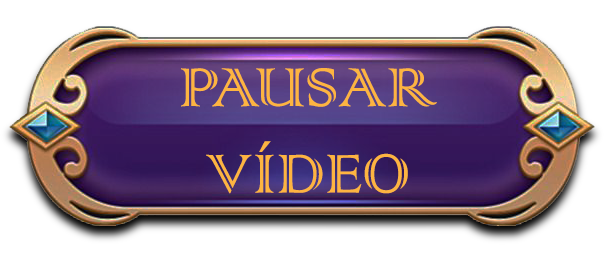
<style>
.page{position:relative;width:614px;height:264px;background:#ffffff}
.page>*{position:absolute;margin:0}
.t1{font:72px "ColonnaMT";color:#fdb441}
</style>
<div class="page">
<p class="t1" style="left:181px;top:68px;width:256px;height:126px;text-align:center">PAUSAR VÍDEO</p>
</div>
